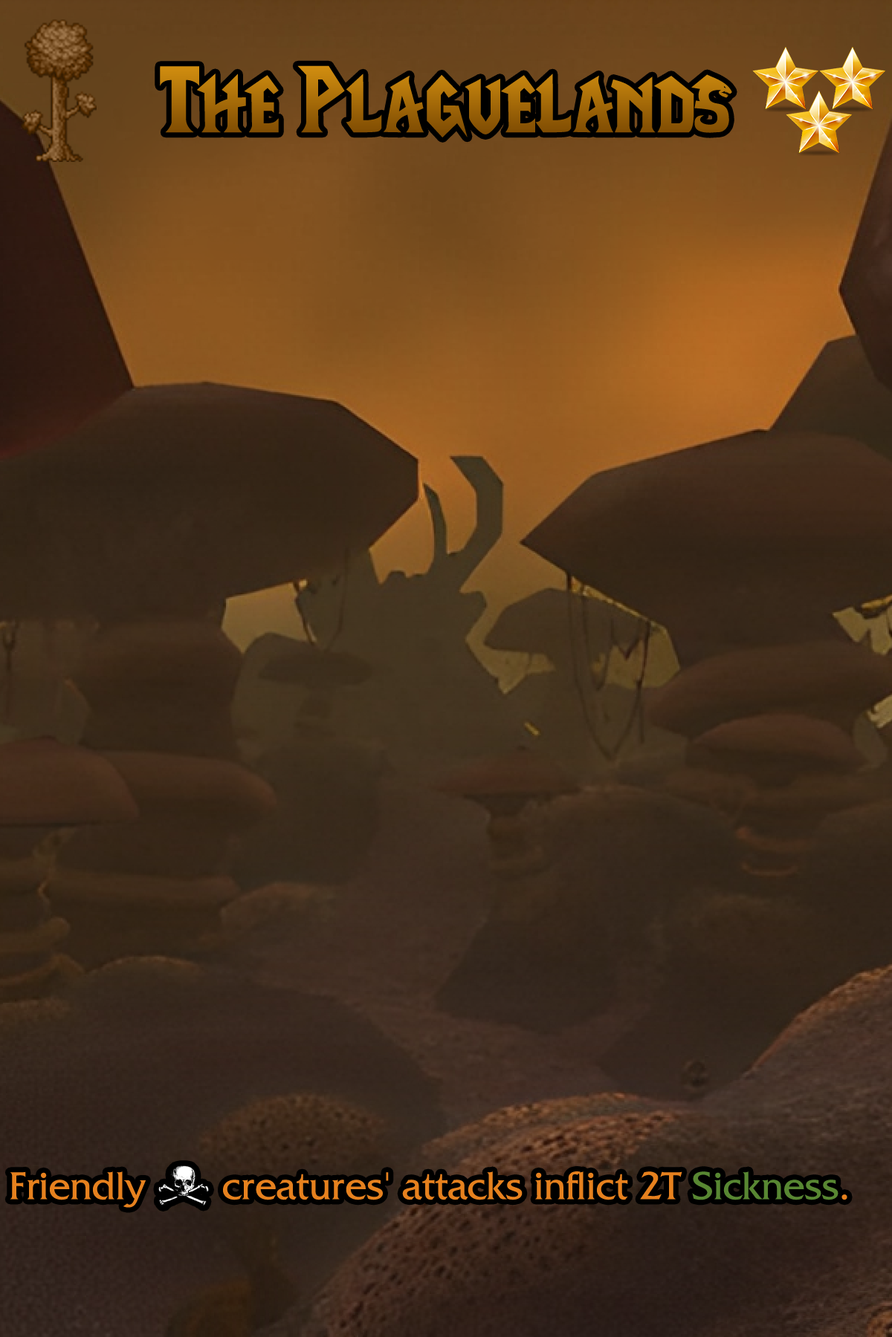
<style>
.page{position:relative;width:892px;height:1337px}
.page>*{position:absolute;margin:0}
.t1{font:161.2px "LifeCraft"}
.t2{font:69.8px "FrizQuadrataStd";color:#e6811e}
.t3{font:69.8px "stoogedings-Regular";color:#e6811e}
.t4{font:69.8px "FrizQuadrataStd";color:#588732}
</style>
<div class="page">
<p class="t1" style="left:160px;top:65px;width:572px;height:72px">The Plaguelands</p>
<p class="t2" style="left:10px;top:1166px;width:837px;height:42px">Friendly <span class="t3">[undead]</span> creatures' attacks inflict 2T <span class="t4">Sickness</span>.</p>
</div>
